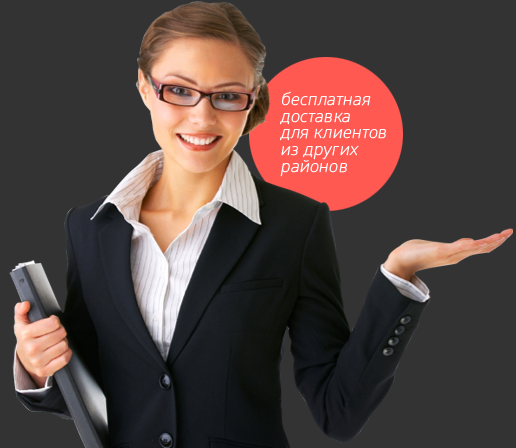
<style>
.page{position:relative;width:516px;height:448px;background:#333333}
.page>*{position:absolute;margin:0}
.t1{font:16.7px/16.7px "GloberThinFree";color:#ffffff;font-weight:bold;font-style:italic}
</style>
<div class="page">
<p class="t1" style="left:280px;top:91px;width:106px;height:86px">бесплатная <br>доставка <br>для клиентов <br>из других <br>районов</p>
</div>
